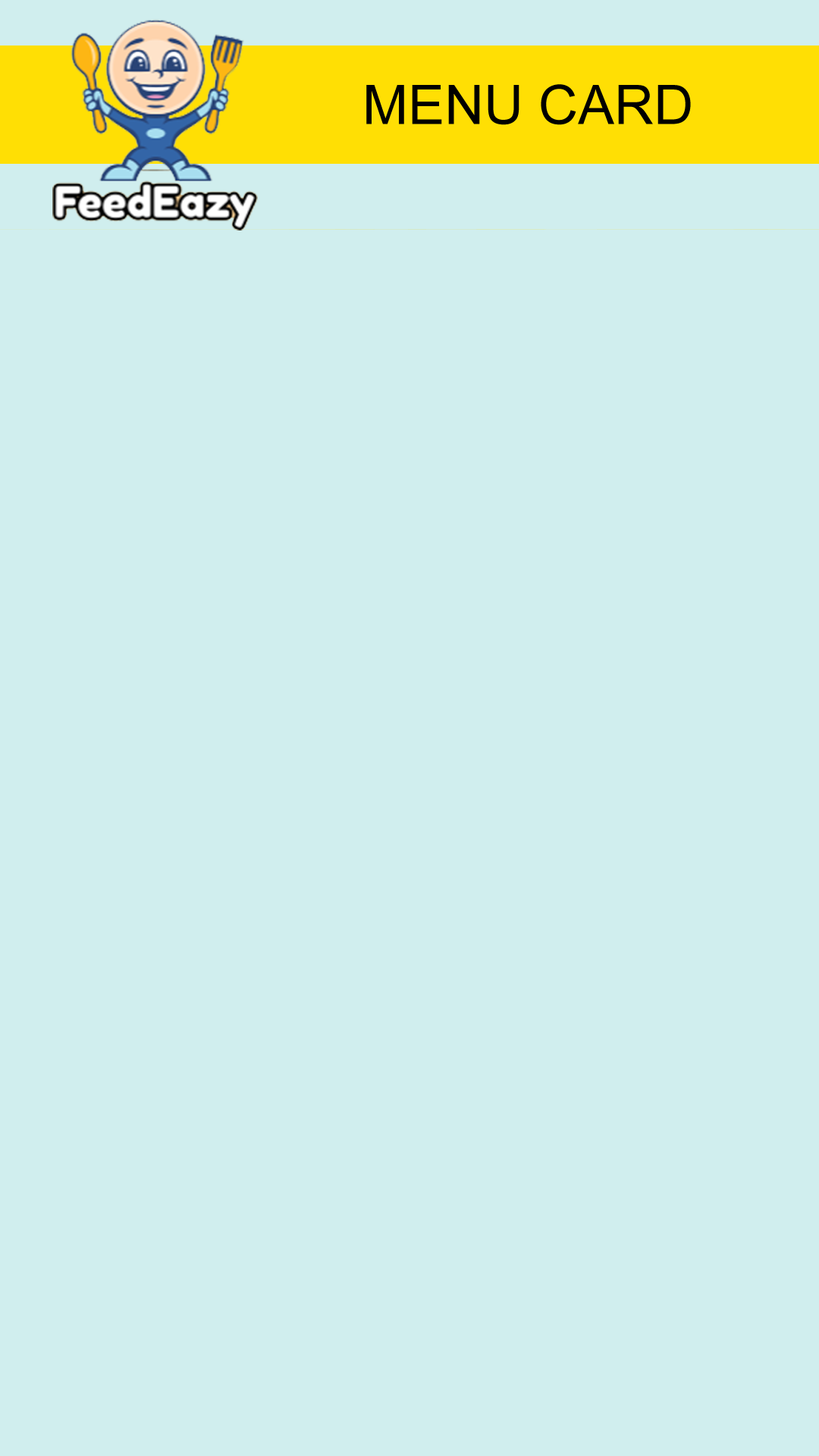
<style>
.page{position:relative;width:819px;height:1456px;background:#d0eeee}
.page>*{position:absolute;margin:0}
.t1{font:54.6px "ArialMT";color:#000000}
</style>
<div class="page">
<p class="t1" style="left:366px;top:84px;width:325px;height:41px">MENU CARD</p>
</div>
